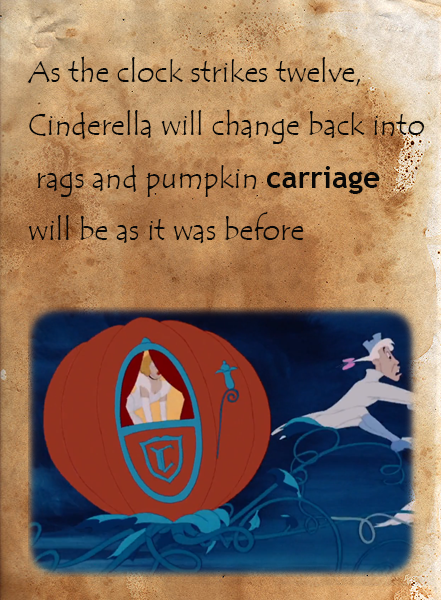
<style>
.page{position:relative;width:441px;height:600px}
.page>*{position:absolute;margin:0}
.t1{font:30px "TempusSansITC";color:#070707}
.t2{font:30px "TrebuchetMS-Bold";color:#070707}
</style>
<div class="page">
<p class="t1" style="left:27px;top:56px;width:398px;height:187px">As the clock strikes twelve, <br>Cinderella will change back into<br> rags and pumpkin <span class="t2">carriage <br></span>will be as it was before</p>
</div>
